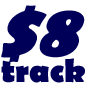
<style>
.page{position:relative;width:88px;height:88px;background:#000058}
.page>*{position:absolute;margin:0}
.t1{font:78px "BerlinSansFB-Bold";color:#000058;scale:0.95 1}
.t2{font:33.4px "BerlinSansFB-Bold";color:#000058}
</style>
<div class="page">
<p class="t1" style="left:1px;top:5px;width:84px;height:57px">$8</p>
<p class="t2" style="left:1px;top:58px;width:84px;height:25px">track</p>
</div>
